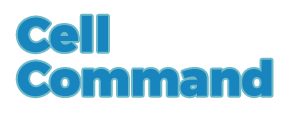
<style>
.page{position:relative;width:300px;height:120px;background:#ffffff}
.page>*{position:absolute;margin:0}
.t1{font:48px "Montserrat-ExtraBold";color:#1885be}
</style>
<div class="page">
<p class="t1" style="left:17px;top:15px;width:91px;height:38px">Cell</p>
<p class="t1" style="left:17px;top:59px;width:255px;height:38px">Command</p>
</div>
